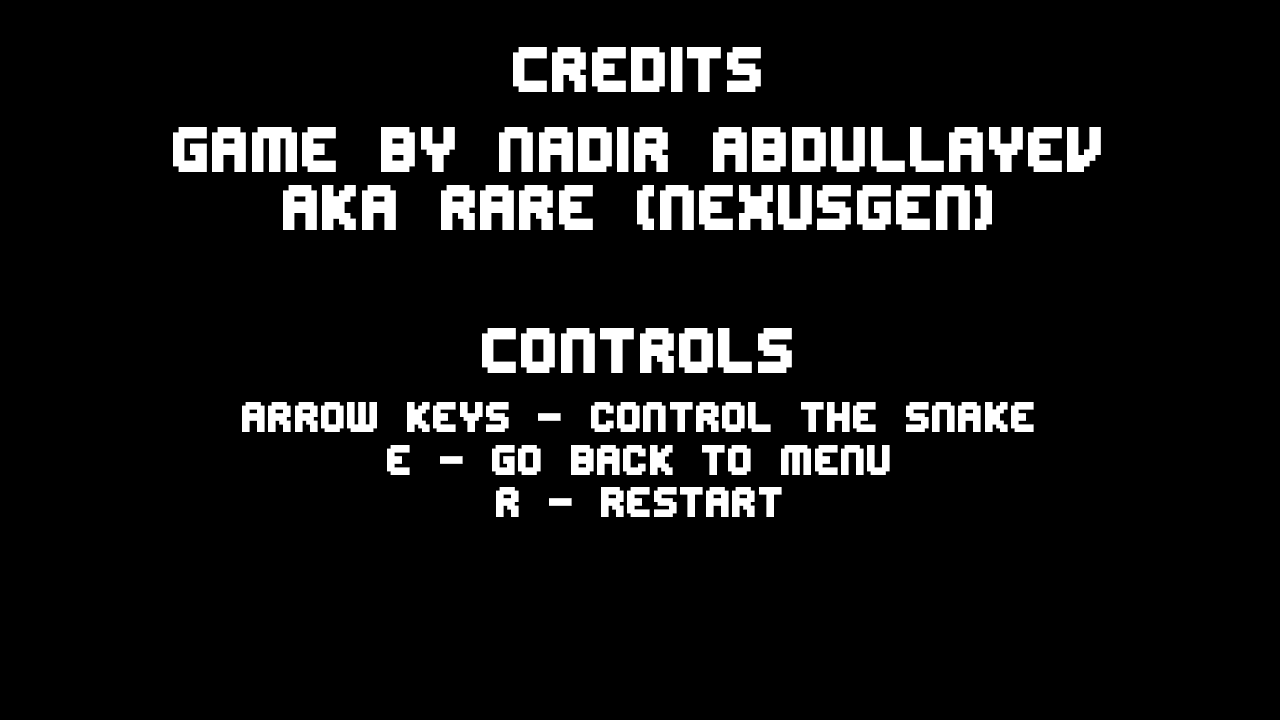
<style>
.page{position:relative;width:1280px;height:720px;background:#000000}
.page>*{position:absolute;margin:0}
.t1{font:72px "Edit Undo -BRK-";color:#ffffff}
.t2{font:48px "Edit Undo -BRK-";color:#ffffff}
</style>
<div class="page">
<p class="t1" style="left:513px;top:47px;width:248px;height:45px">Credits</p>
<p class="t1" style="left:173px;top:127px;width:928px;height:45px">Game by nadir abdullayev</p>
<p class="t1" style="left:283px;top:185px;width:709px;height:45px">Aka rare (nexusgen)</p>
<p class="t1" style="left:482px;top:328px;width:310px;height:45px">Controls</p>
<p class="t2" style="left:242px;top:402px;width:792px;height:30px">Arrow keys - control the snake</p>
<p class="t2" style="left:387px;top:445px;width:503px;height:30px">E - Go back to menu</p>
<p class="t2" style="left:496px;top:487px;width:286px;height:30px">r - Restart</p>
</div>
